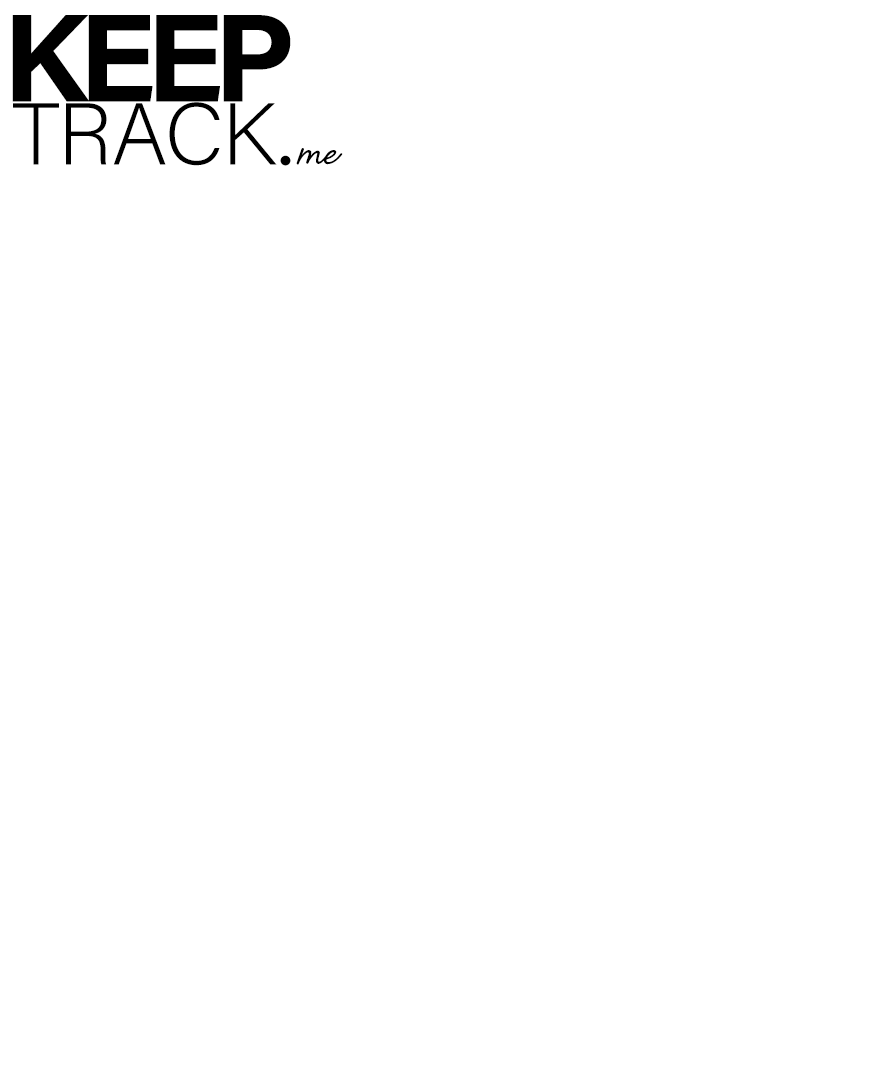
<style>
.page{position:relative;width:896px;height:1080px;background:#ffffff}
.page>*{position:absolute;margin:0}
.t1{font:125px "AcuminPro-Bold";letter-spacing:-0.075em;color:#000000}
.t2{font:87.5px "AcuminPro-ExtraLight";letter-spacing:-0.025em;color:#000000}
.t3{font:58.3px "Shelby";color:#000000}
.t4{font:45.8px "AzoSans-Black";letter-spacing:-0.075em;color:#000000}
</style>
<div class="page">
<p class="t1" style="left:12px;top:15px;width:279px;height:87px">KEEP</p>
<p class="t2" style="left:13px;top:102px;width:264px;height:64px">TRACK</p>
<p class="t3" style="left:296px;top:148px;width:47px;height:17px">me</p>
<p class="t4" style="left:280px;top:155px;width:11px;height:11px">.</p>
</div>
